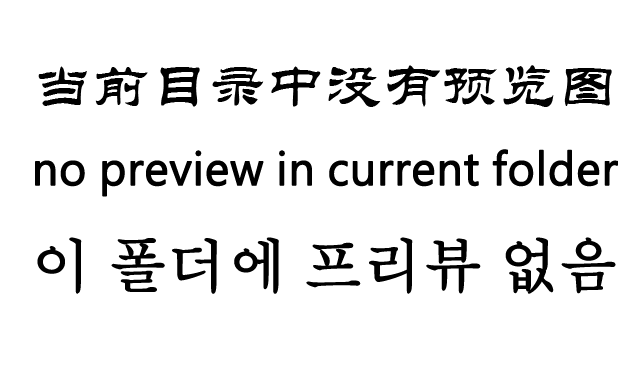
<style>
.page{position:relative;width:640px;height:365px;background:#ffffff}
.page>*{position:absolute;margin:0}
.t1{font:43.1px "STLiti";color:#000000}
.t2{font:32.3px "MicrosoftJhengHeiRegular";color:#000000;font-weight:bold}
.t3{font:43.6px "AdobeMyungjoStd-Medium";color:#000000;font-weight:bold}
</style>
<div class="page">
<p class="t1" style="left:38px;top:65px;width:574px;height:42px">当前目录中没有预览图</p>
<p class="t2" style="left:35px;top:149px;width:583px;height:48px">no preview in current folder</p>
<p class="t3" style="left:37px;top:237px;width:579px;height:57px">이 폴더에 프리뷰 없음</p>
</div>
